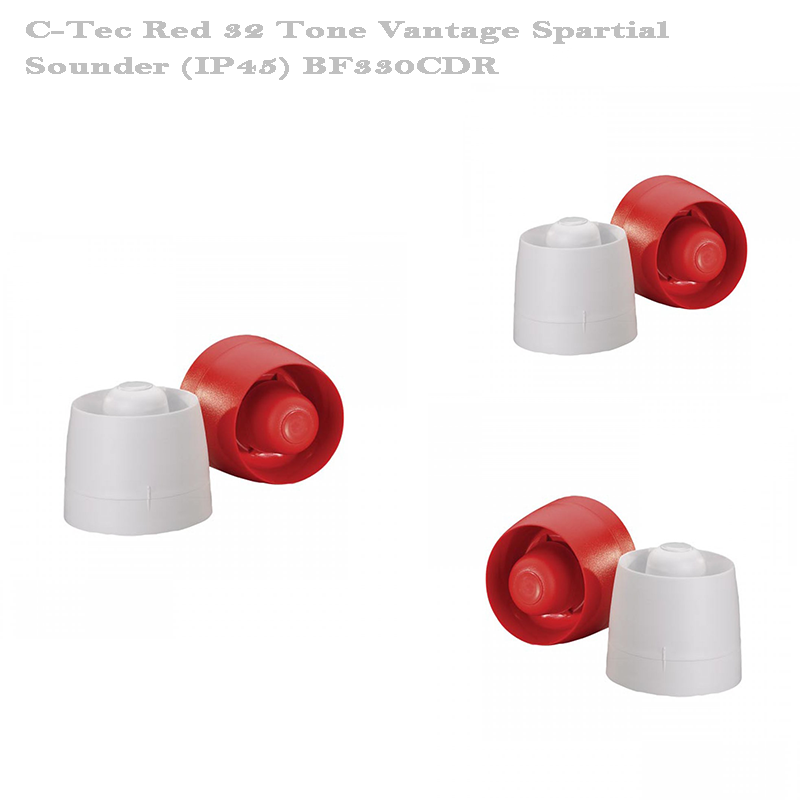
<style>
.page{position:relative;width:800px;height:800px;background:#ffffff}
.page>*{position:absolute;margin:0}
.t1{font:24px "BellMTBold";color:#c0c0c0;font-weight:bold;scale:1.57 1}
</style>
<div class="page">
<p class="t1" style="left:26px;top:21px;width:643px;height:59px">C-Tec Red 32 Tone Vantage Spartial <br><br>Sounder (IP45) BF330CDR</p>
</div>
